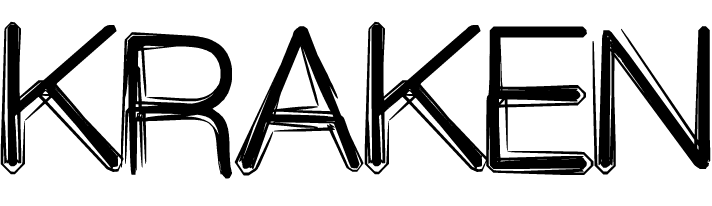
<style>
.page{position:relative;width:712px;height:206px;background:#ffffff}
.page>*{position:absolute;margin:0}
.t1{font:200px "Decibel";color:#000000}
</style>
<div class="page">
<p class="t1" style="left:0px;top:21px;width:711px;height:158px">KRAKEN</p>
</div>
